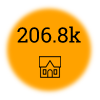
<style>
.page{position:relative;width:100px;height:100px;background:#ffa200}
.page>*{position:absolute;margin:0}
.t1{font:36px "RobotoSlab-Regular";color:#000000}
</style>
<div class="page">
<p class="t1" style="left:17px;top:26px;width:64px;height:17px">206.8k</p>
</div>
